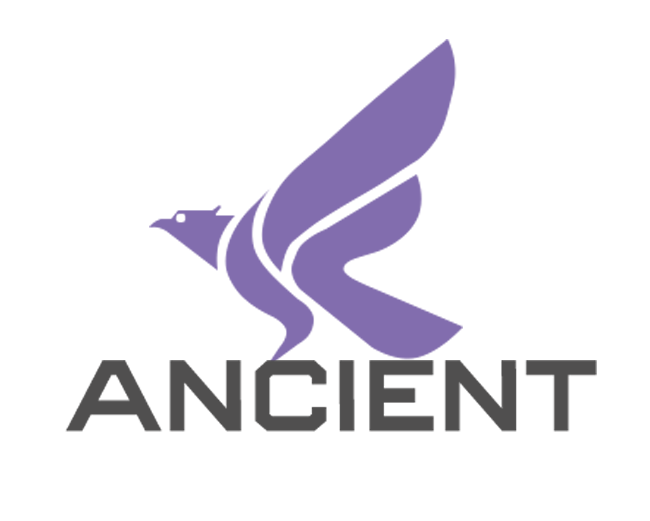
<style>
.page{position:relative;width:650px;height:521px;background:#ffffff}
.page>*{position:absolute;margin:0}
.t1{font:117.6px "AstronomusRegular";color:#504f4f}
</style>
<div class="page">
<p class="t1" style="left:65px;top:360px;width:532px;height:72px">ancient</p>
</div>
